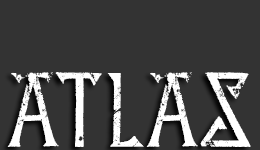
<style>
.page{position:relative;width:260px;height:150px;background:#333333}
.page>*{position:absolute;margin:0}
.t1{font:89.5px "Hidden-Archives";color:#ffffff;scale:0.89 1}
</style>
<div class="page">
<p class="t1" style="left:7px;top:72px;width:244px;height:75px">Atlas</p>
</div>
